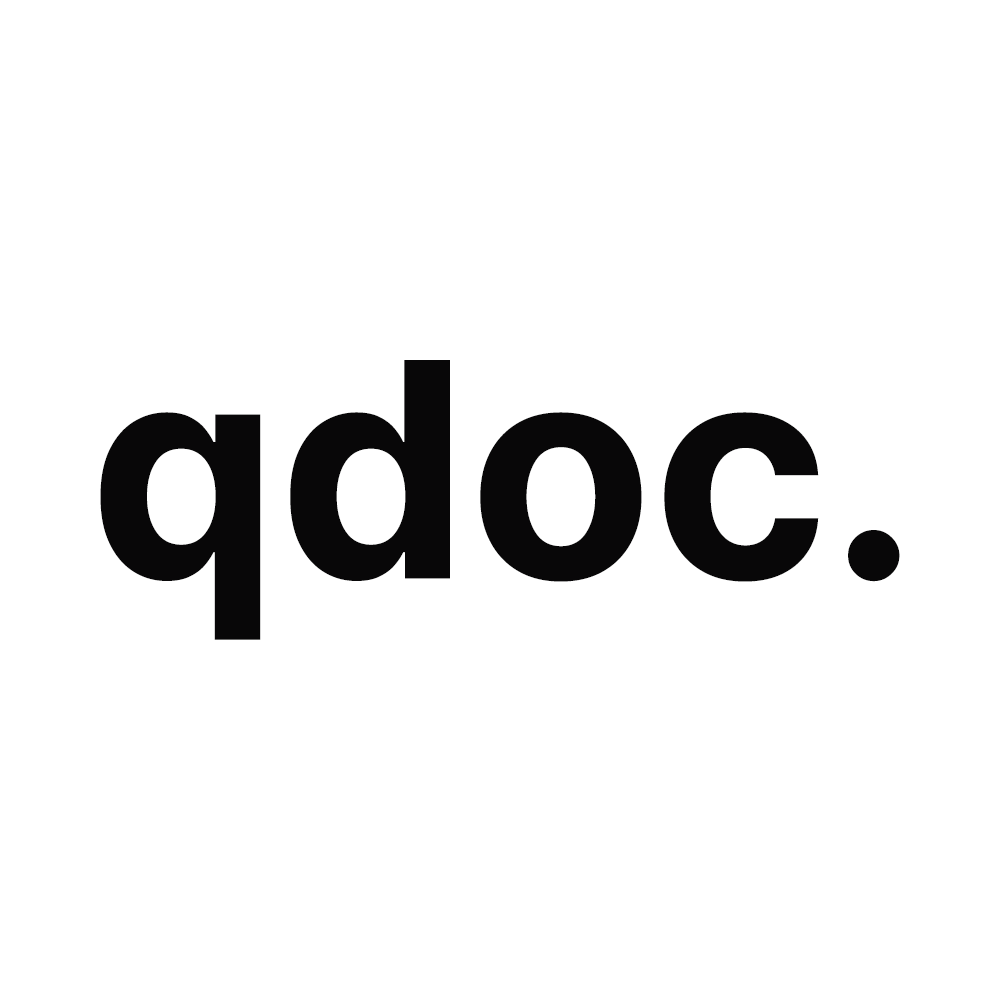
<style>
.page{position:relative;width:1000px;height:1000px;background:#ffffff}
.page>*{position:absolute;margin:0}
.t1{font:300px "Inter-Bold";color:#080708}
</style>
<div class="page">
<p class="t1" style="left:100px;top:360px;width:800px;height:280px">qdoc.</p>
</div>
